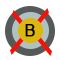
<style>
.page{position:relative;width:60px;height:60px;background:#ffffff}
.page>*{position:absolute;margin:0}
.t1{font:16px "ArialMT";color:#000000;font-weight:bold}
</style>
<div class="page">
<p class="t1" style="left:25px;top:24px;width:10px;height:13px">B</p>
</div>
